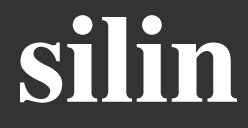
<style>
.page{position:relative;width:248px;height:128px;background:#333333}
.page>*{position:absolute;margin:0}
.t1{font:125px "FZXBSJW--GB1-0";color:#ffffff}
</style>
<div class="page">
<p class="t1" style="left:20px;top:15px;width:217px;height:88px">silin</p>
</div>
